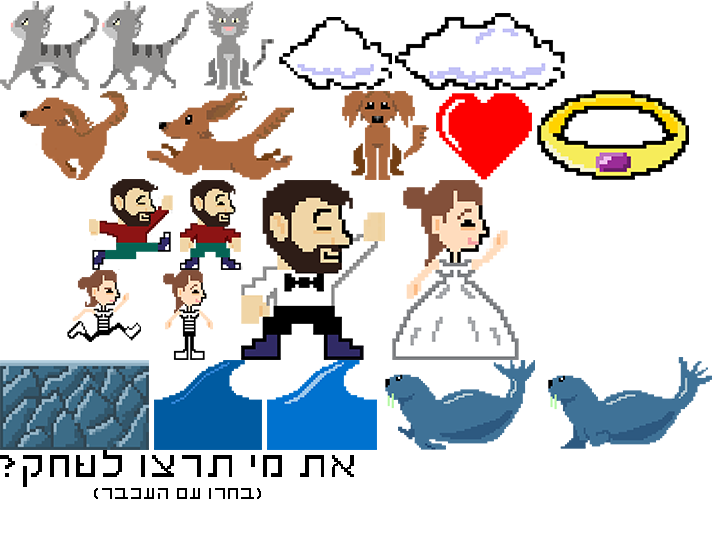
<style>
.page{position:relative;width:719px;height:540px;background:#ffffff}
.page>*{position:absolute;margin:0}
.t1{font:36px "Stanger";color:#000000;font-weight:bold}
.t2{font:18px "Stanger";color:#000000;font-weight:bold}
</style>
<div class="page">
<p class="t1" style="left:0px;top:450px;width:354px;height:49px;text-align:center">את מי תרצו לשחק?<br><span class="t2">(בחרו עם העכבר)</span></p>
</div>
